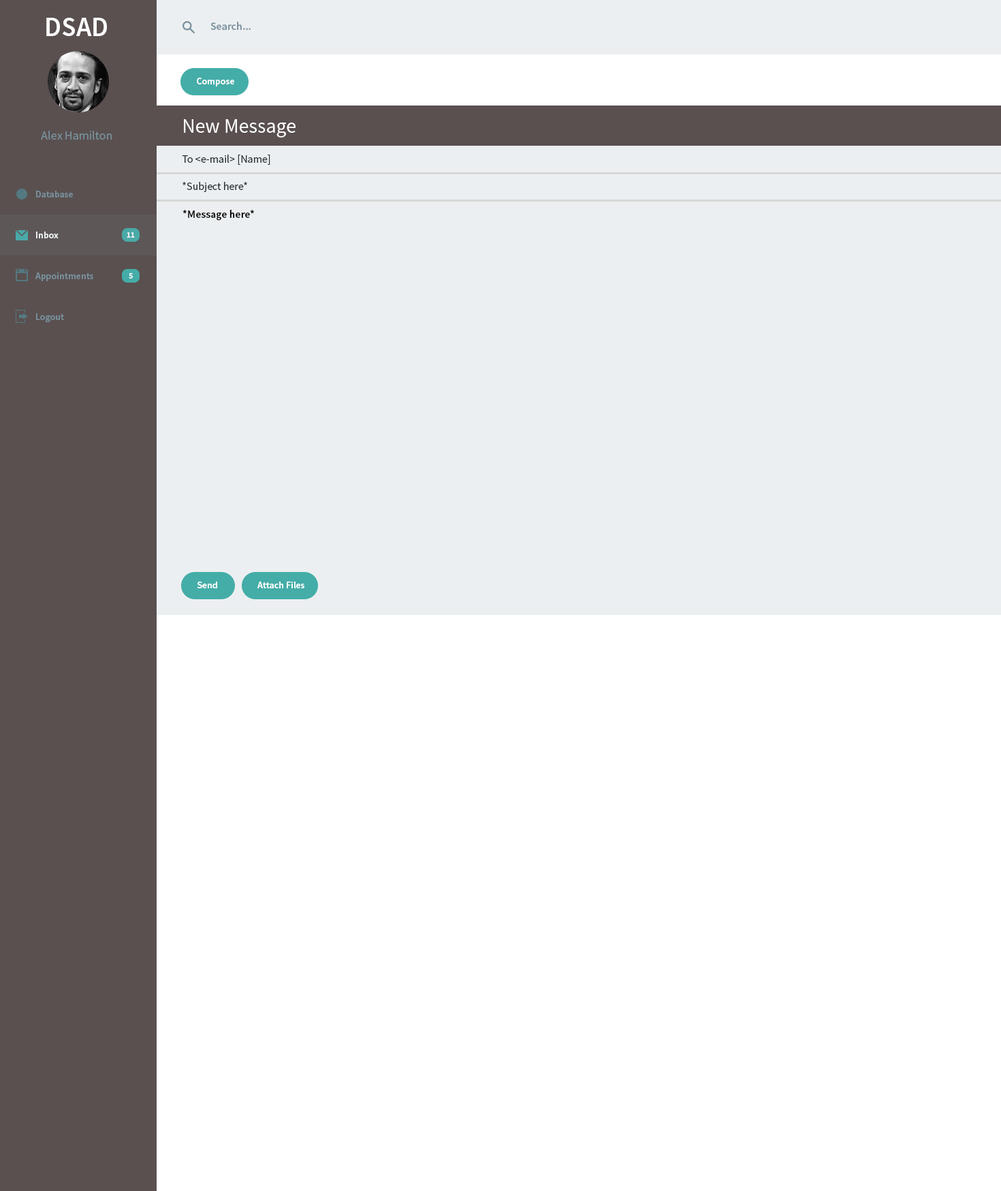
<style>
.page{position:relative;width:1001px;height:1191px;background:#ffffff}
.page>*{position:absolute;margin:0}
.t1{font:27.2px "SourceSansPro-Semibold";color:#ffffff}
.t2{font:10.9px "SourceSansPro-Semibold";color:#78909c}
.t3{font:9.5px "SourceSansPro-Semibold";color:#ffffff}
.t4{font:20.4px "SourceSansPro-Regular";color:#ffffff}
.t5{font:12.3px "SourceSansPro-Regular";color:#78909c}
.t6{font:11px "SourceSansPro-Regular";color:#263238}
.t7{font:9.5px "SourceSansPro-Semibold";color:#78909c}
.t8{font:10.9px "SourceSansPro-Semibold";color:#000000}
.t9{font:8.2px "SourceSansPro-Bold";color:#f8fafb}
</style>
<div class="page">
<p class="t1" style="left:46px;top:18px;width:61px;height:18px">DSAD</p>
<p class="t2" style="left:210px;top:22px;width:41px;height:8px">Search...</p>
<p class="t3" style="left:197px;top:78px;width:37px;height:8px">Compose</p>
<p class="t4" style="left:184px;top:119px;width:112px;height:19px">New Message</p>
<p class="t5" style="left:41px;top:131px;width:71px;height:9px">Alex Hamilton</p>
<p class="t6" style="left:182px;top:155px;width:88px;height:10px">To &lt;e-mail&gt; [Name]</p>
<p class="t6" style="left:183px;top:182px;width:64px;height:10px">*Subject here*</p>
<p class="t7" style="left:36px;top:191px;width:37px;height:6px">Database</p>
<p class="t8" style="left:183px;top:210px;width:71px;height:11px">*Message here*</p>
<p class="t3" style="left:36px;top:232px;width:23px;height:6px">Inbox</p>
<p class="t9" style="left:127px;top:232px;width:8px;height:6px">11</p>
<p class="t7" style="left:35px;top:272px;width:58px;height:9px">Appointments</p>
<p class="t9" style="left:129px;top:273px;width:4px;height:6px">5</p>
<p class="t7" style="left:36px;top:313px;width:28px;height:10px">Logout</p>
<p class="t3" style="left:197px;top:582px;width:20px;height:6px">Send</p>
<p class="t3" style="left:257px;top:582px;width:47px;height:6px">Attach Files</p>
</div>
